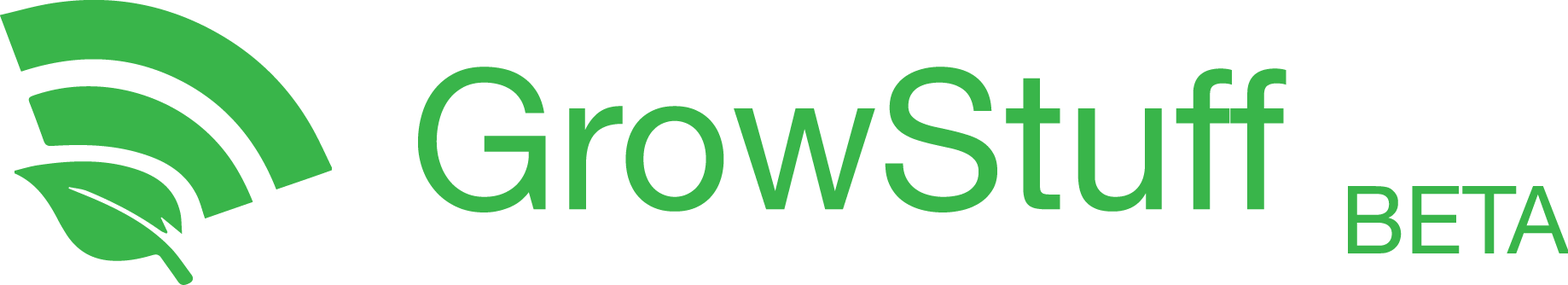
<style>
.page{position:relative;width:1568px;height:285px;background:#ffffff}
.page>*{position:absolute;margin:0}
.t1{font:194.7px "HelveticaNeue";color:#39b54a}
.t2{font:93.8px "HelveticaNeue";color:#39b54a}
</style>
<div class="page">
<p class="t1" style="left:418px;top:67px;width:868px;height:145px">GrowStuff</p>
<p class="t2" style="left:1348px;top:186px;width:222px;height:67px">BETA</p>
</div>
